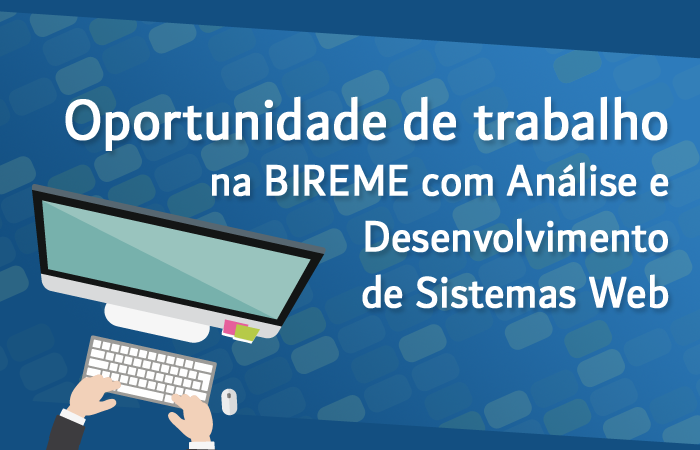
<style>
.page{position:relative;width:700px;height:450px}
.page>*{position:absolute;margin:0}
.t1{font:46.5px "Dubai-Regular";color:#ffffff;font-weight:bold;scale:0.9 1}
.t2{font:60.5px "Dubai-Regular";color:#ffffff;font-weight:bold;scale:0.9 1}
</style>
<div class="page">
<p class="t1" style="left:65px;top:96px;width:604px;height:213px;text-align:right"><span class="t2">Oportunidade de trabalho<br></span>na BIREME com Análise e<br>Desenvolvimento<br>de Sistemas Web</p>
</div>
